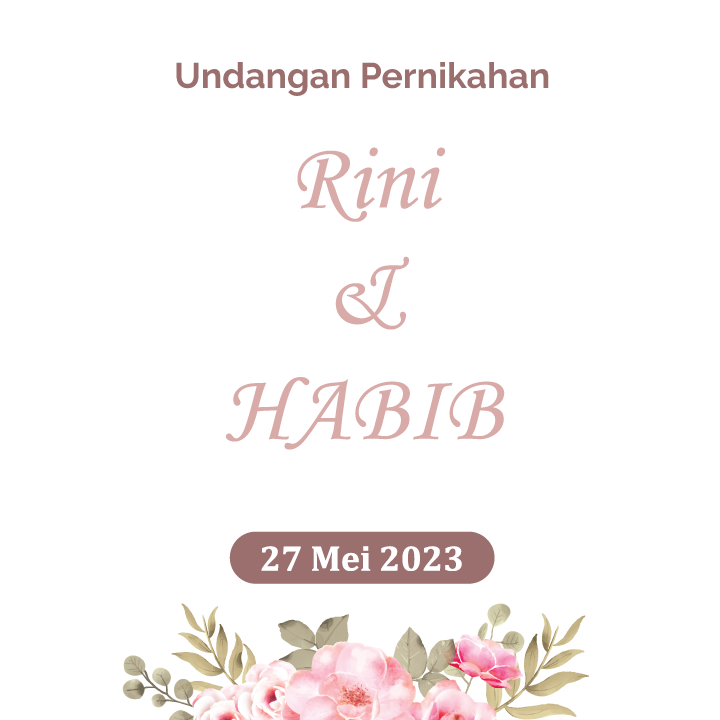
<style>
.page{position:relative;width:720px;height:720px;background:#ffffff}
.page>*{position:absolute;margin:0}
.t1{font:96.3px "MonotypeCorsiva";color:#d8aaa8}
.t2{font:36px "Cambria-Bold";color:#ffffff}
</style>
<div class="page">
<p class="t1" style="left:226px;top:147px;width:279px;height:303px;text-align:center">Rini<br>&amp;<br>HABIB</p>
<p class="t2" style="left:261px;top:546px;width:201px;height:25px">27 Mei 2023</p>
</div>
